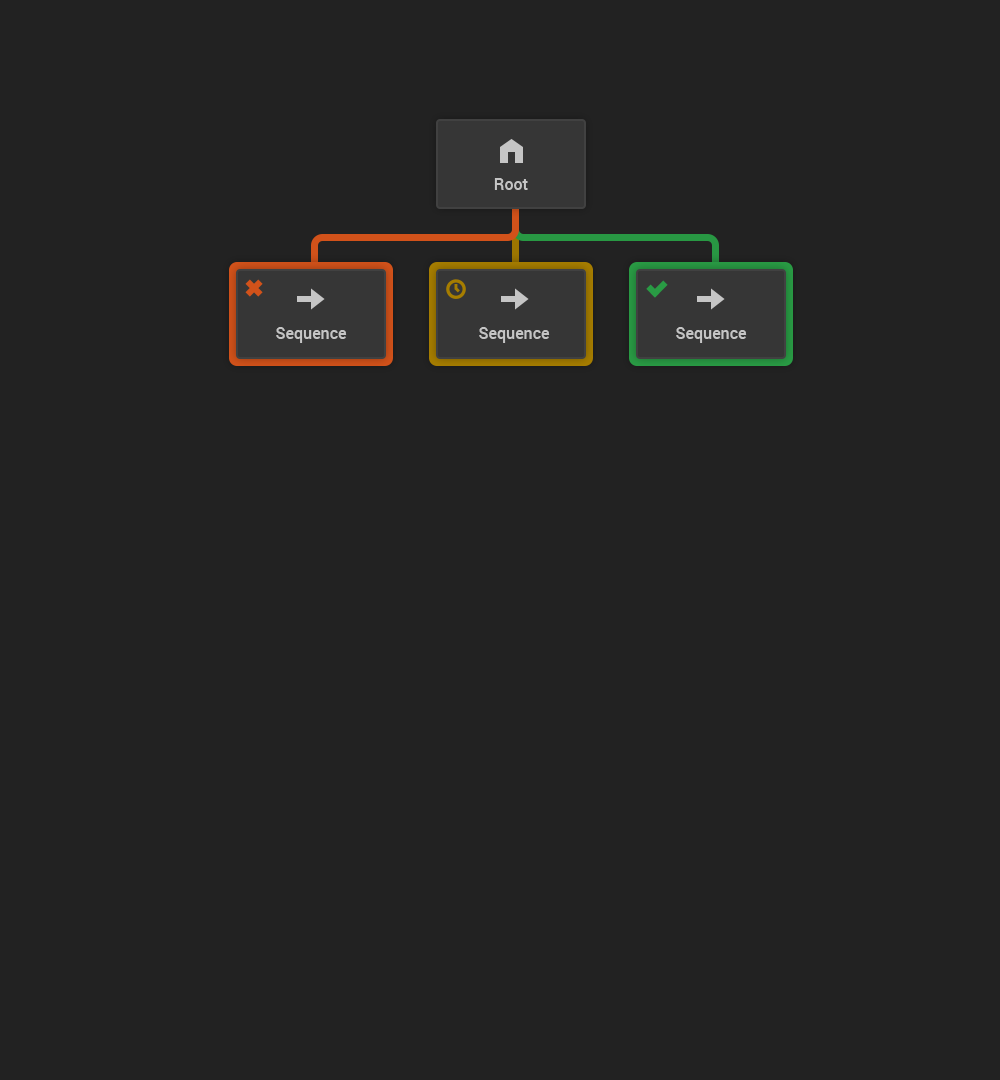
<style>
.page{position:relative;width:1000px;height:1080px;background:#222222}
.page>*{position:absolute;margin:0}
.t1{font:16px "Roboto-Medium";color:#c5c5c5}
</style>
<div class="page">
<p class="t1" style="left:494px;top:178px;width:34px;height:12px">Root</p>
<p class="t1" style="left:276px;top:327px;width:71px;height:16px">Sequence</p>
<p class="t1" style="left:479px;top:327px;width:71px;height:16px">Sequence</p>
<p class="t1" style="left:676px;top:327px;width:71px;height:16px">Sequence</p>
</div>
